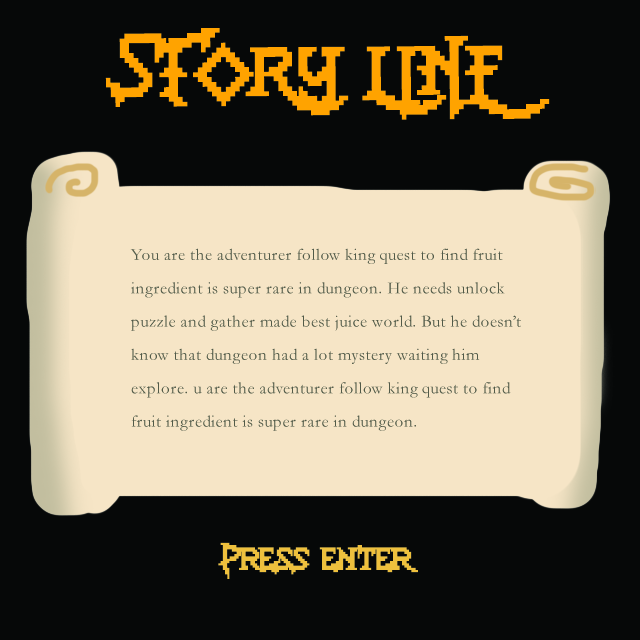
<style>
.page{position:relative;width:640px;height:640px;background:#060808}
.page>*{position:absolute;margin:0}
.t1{font:53.9px/145.5px "Lady-Radical-2";letter-spacing:0.03em;color:#ffa300;scale:0.95 1}
.t2{font:16.7px/33.3px "Garamond";letter-spacing:0.03em;color:#515a48}
.t3{font:25px "Lady-Radical-2";letter-spacing:0.03em;color:#eec03d}
</style>
<div class="page">
<p class="t1" style="left:105px;top:28px;width:445px;height:92px">STORY LINE</p>
<p class="t2" style="left:130px;top:248px;width:391px;height:183px">You are the adventurer follow king quest to find fruit ingredient is super rare in dungeon. He needs unlock puzzle and gather made best juice world. But he doesn’t know that dungeon had a lot mystery waiting him explore. u are the adventurer follow king quest to find fruit ingredient is super rare in dungeon.</p>
<p class="t3" style="left:218px;top:542px;width:200px;height:37px">Press enter</p>
</div>
